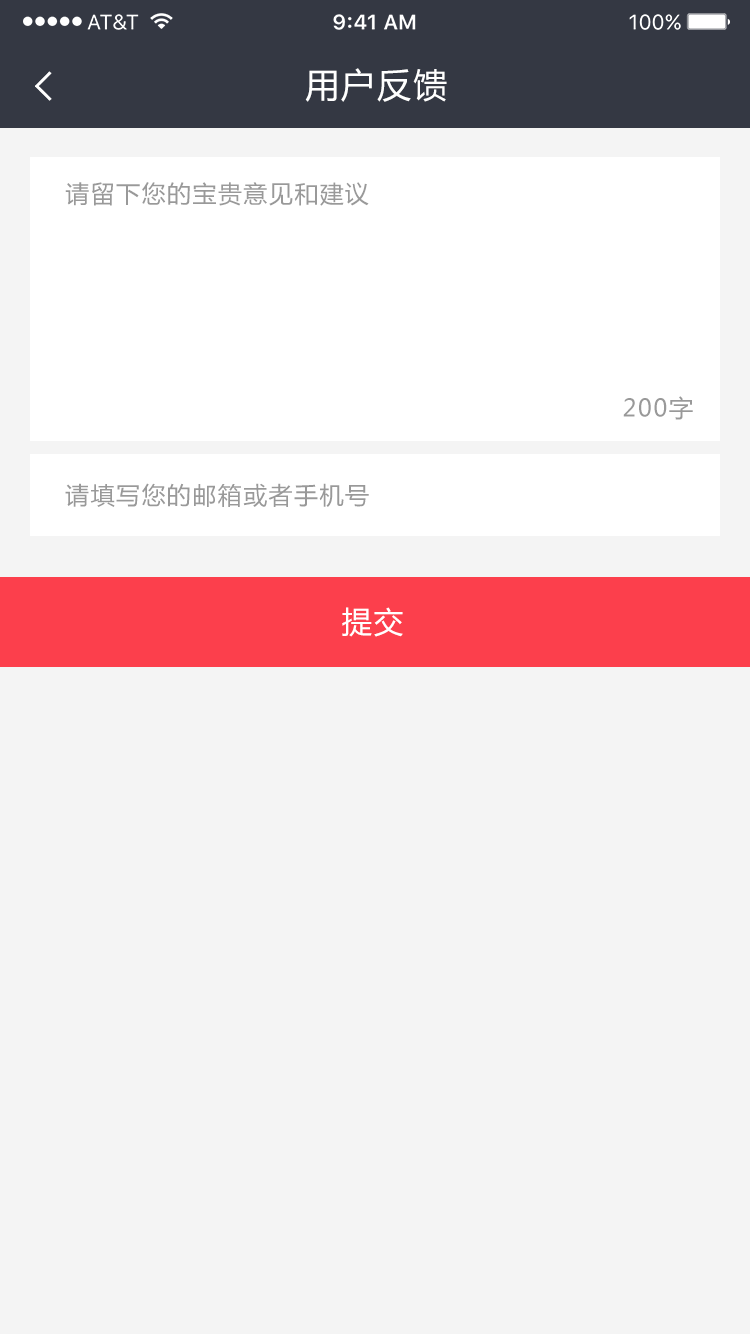
<style>
.page{position:relative;width:750px;height:1334px;background:#f4f4f4}
.page>*{position:absolute;margin:0}
.t1{font:34px "MicrosoftYaHei";letter-spacing:0.06em;color:#ffffff}
.t2{font:24px "MicrosoftYaHei";letter-spacing:0.06em;color:#999999}
.t3{font:30px "MicrosoftYaHei";letter-spacing:0.06em;color:#ffffff}
</style>
<div class="page">
<p class="t1" style="left:305px;top:68px;width:142px;height:34px">用户反馈</p>
<p class="t2" style="left:65px;top:182px;width:304px;height:24px">请留下您的宝贵意见和建议</p>
<p class="t2" style="left:623px;top:396px;width:70px;height:24px">200字</p>
<p class="t2" style="left:65px;top:483px;width:304px;height:24px">请填写您的邮箱或者手机号</p>
<p class="t3" style="left:342px;top:607px;width:61px;height:30px">提交</p>
</div>
